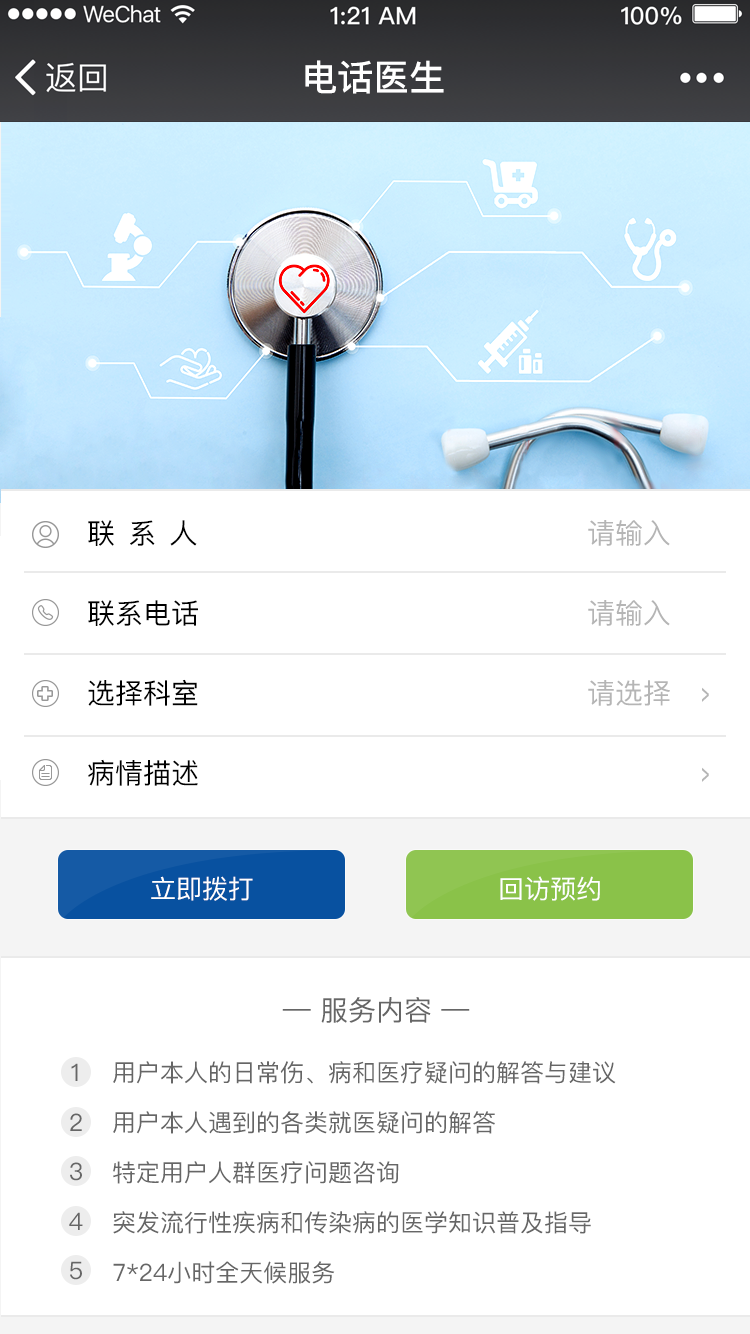
<style>
.page{position:relative;width:750px;height:1334px;background:#ffffff}
.page>*{position:absolute;margin:0}
.t1{font:36px "PingFang-SC-Bold";color:#ffffff}
.t2{font:28px/80px "PingFang-SC-Medium";color:#000000}
.t3{font:28px/80px "PingFang-SC-Medium";letter-spacing:0.07em;color:#000000}
.t4{font:28px/80px "PingFang-SC-Medium";color:#b5b5b5}
.t5{font:28px/80px "PingFang-SC-Bold";letter-spacing:-0.04em;color:#b5b5b5;scale:0.48 1}
.t6{font:26px "PingFang-SC-Medium";color:#ffffff}
.t7{font:28px "PingFang-SC-Medium";color:#666666}
.t8{font:24px/50px "PingFang-SC-Medium";color:#666666}
.t9{font:24px "PingFang-SC-Medium";color:#666666}
</style>
<div class="page">
<p class="t1" style="left:305px;top:60px;width:139px;height:34px">电话医生</p>
<p class="t2" style="left:88px;top:520px;width:110px;height:266px"><span class="t3">联 系 人<br></span>联系电话<br>选择科室<br>病情描述</p>
<p class="t4" style="left:588px;top:520px;width:82px;height:186px">请输入<br>请输入<br>请选择</p>
<p class="t5" style="left:702px;top:687px;width:7px;height:95px">&gt;<br>&gt;</p>
<p class="t6" style="left:151px;top:876px;width:102px;height:25px">立即拨打</p>
<p class="t6" style="left:500px;top:876px;width:100px;height:25px">回访预约</p>
<p class="t7" style="left:282px;top:997px;width:188px;height:26px">— 服务内容 —</p>
<p class="t8" style="left:113px;top:1061px;width:503px;height:223px">用户本人的日常伤、病和医疗疑问的解答与建议<br>用户本人遇到的各类就医疑问的解答<br>特定用户人群医疗问题咨询<br>突发流行性疾病和传染病的医学知识普及指导<br>7*24小时全天候服务</p>
<p class="t9" style="left:71px;top:1063px;width:7px;height:18px">1</p>
<p class="t9" style="left:70px;top:1113px;width:12px;height:18px">2</p>
<p class="t9" style="left:70px;top:1162px;width:12px;height:19px">3</p>
<p class="t9" style="left:69px;top:1212px;width:14px;height:18px">4</p>
<p class="t9" style="left:70px;top:1261px;width:12px;height:19px">5</p>
</div>
